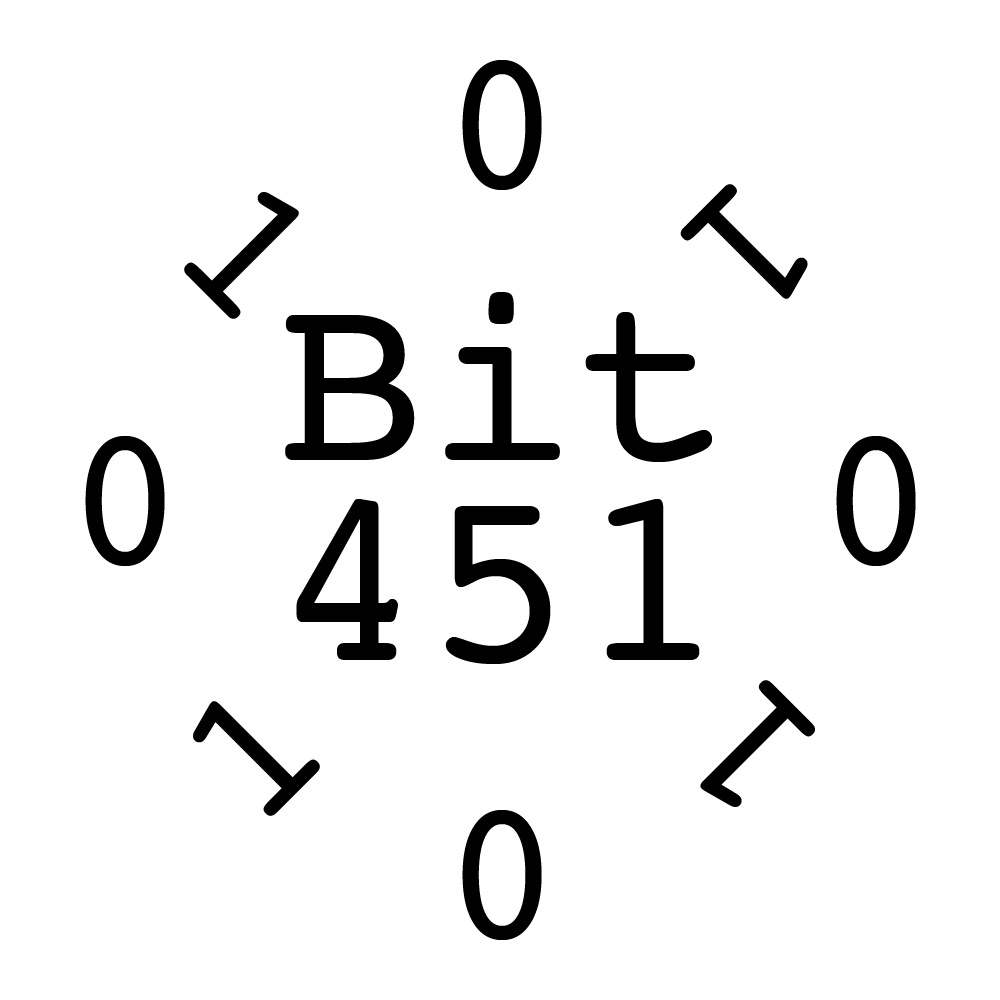
<style>
.page{position:relative;width:1000px;height:1000px;background:#ffffff}
.page>*{position:absolute;margin:0}
.t1{font:197px "Courier";color:#000000}
.t2{font:250px/200px "Courier";color:#000000}
</style>
<div class="page">
<p class="t1" style="left:462px;top:60px;width:80px;height:130px">0</p>
<p class="t1" style="left:680px;top:184px;width:128px;height:115px;rotate:135deg">1</p>
<p class="t1" style="left:184px;top:192px;width:115px;height:127px;rotate:45deg">1</p>
<p class="t2" style="left:285px;top:292px;width:427px;height:372px;text-align:center">Bit<br>451</p>
<p class="t1" style="left:85px;top:436px;width:80px;height:130px">0</p>
<p class="t1" style="left:836px;top:436px;width:80px;height:130px">0</p>
<p class="t1" style="left:700px;top:680px;width:115px;height:127px;rotate:-135deg">1</p>
<p class="t1" style="left:193px;top:701px;width:127px;height:115px;rotate:-45deg">1</p>
<p class="t1" style="left:462px;top:810px;width:80px;height:130px">0</p>
</div>
